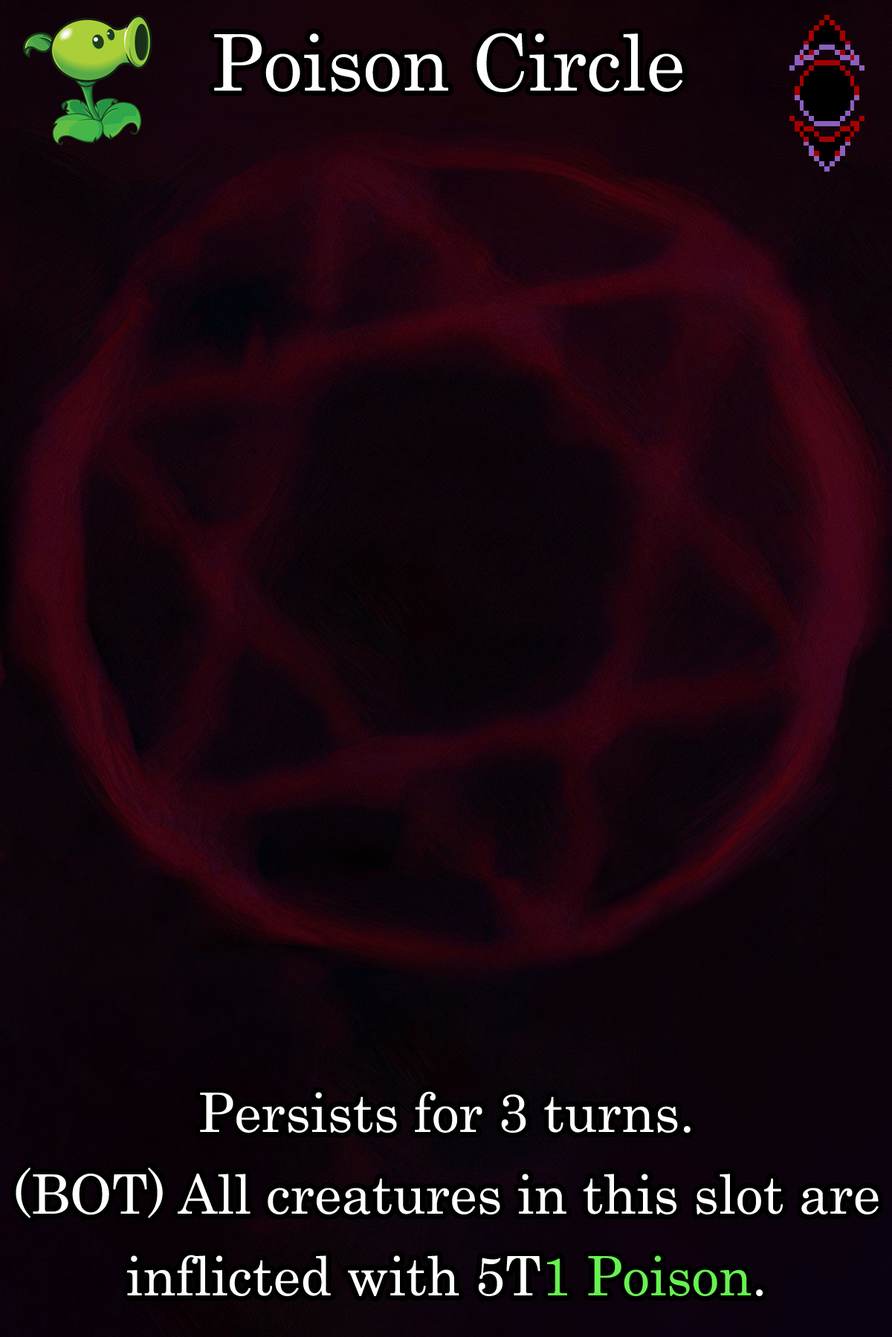
<style>
.page{position:relative;width:892px;height:1337px}
.page>*{position:absolute;margin:0}
.t1{font:133.7px "Century";color:#ffffff}
.t2{font:92.9px/81.7px "Century";color:#ffffff}
.t3{font:92.9px/81.7px "Century";color:#66f24f}
</style>
<div class="page">
<p class="t1" style="left:214px;top:33px;width:469px;height:59px">Poison Circle</p>
<p class="t2" style="left:16px;top:1091px;width:862px;height:206px;text-align:center">Persists for 3 turns.<br>(BOT) All creatures in this slot are inflicted with 5T<span class="t3">1 Poison</span>.</p>
</div>
